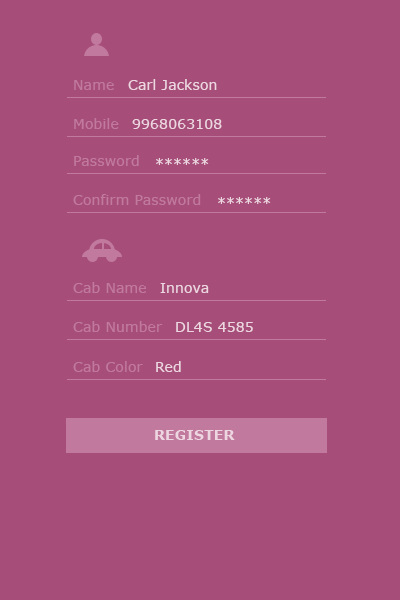
<style>
.page{position:relative;width:400px;height:600px;background:#a64d79}
.page>*{position:absolute;margin:0}
.t1{font:14px "Verdana";letter-spacing:0.01em;color:#c1799e}
.t2{font:14px "Verdana";letter-spacing:0.01em;color:#edd6e0}
.t3{font:14px "Verdana-Bold";letter-spacing:0.01em;color:#edd6e0}
</style>
<div class="page">
<p class="t1" style="left:74px;top:80px;width:40px;height:10px">Name</p>
<p class="t2" style="left:128px;top:79px;width:89px;height:11px">Carl Jackson</p>
<p class="t1" style="left:74px;top:118px;width:45px;height:11px">Mobile</p>
<p class="t2" style="left:132px;top:119px;width:90px;height:10px">9968063108</p>
<p class="t1" style="left:74px;top:155px;width:65px;height:11px">Password</p>
<p class="t2" style="left:156px;top:158px;width:53px;height:7px">******</p>
<p class="t1" style="left:73px;top:194px;width:128px;height:11px">Confirm Password</p>
<p class="t2" style="left:218px;top:197px;width:53px;height:7px">******</p>
<p class="t1" style="left:73px;top:282px;width:73px;height:11px">Cab Name</p>
<p class="t2" style="left:160px;top:283px;width:49px;height:10px">Innova</p>
<p class="t1" style="left:73px;top:321px;width:90px;height:11px">Cab Number</p>
<p class="t2" style="left:176px;top:322px;width:77px;height:10px">DL4S 4585</p>
<p class="t1" style="left:73px;top:361px;width:70px;height:11px">Cab Color</p>
<p class="t2" style="left:156px;top:361px;width:25px;height:11px">Red</p>
<p class="t3" style="left:155px;top:430px;width:80px;height:10px">REGISTER</p>
</div>
